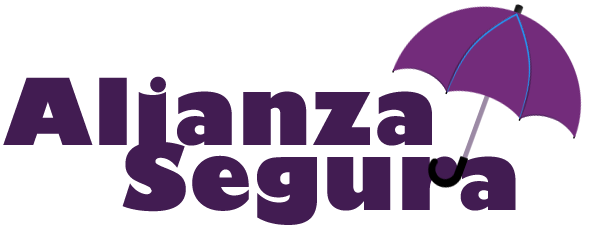
<style>
.page{position:relative;width:593px;height:230px;background:#ffffff}
.page>*{position:absolute;margin:0}
.t1{font:90px "GillSans-UltraBold";letter-spacing:0.02em;color:#421c52}
</style>
<div class="page">
<p class="t1" style="left:3px;top:76px;width:429px;height:70px">Alianza</p>
<p class="t1" style="left:122px;top:141px;width:394px;height:84px">Segura</p>
</div>
